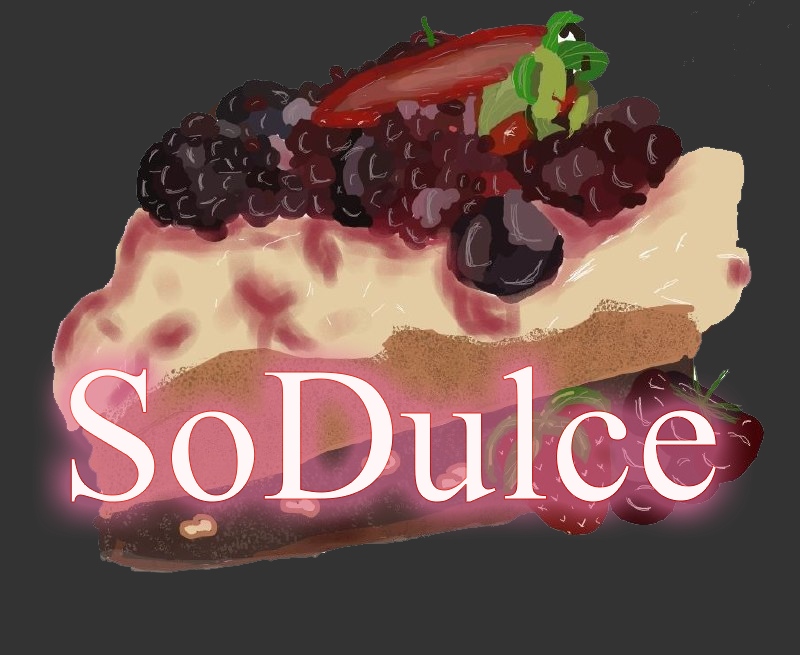
<style>
.page{position:relative;width:800px;height:655px;background:#333333}
.page>*{position:absolute;margin:0}
.t1{font:231.8px "ShonarBangla";color:#fff7f7}
</style>
<div class="page">
<p class="t1" style="left:70px;top:366px;width:647px;height:136px">SoDulce</p>
</div>
